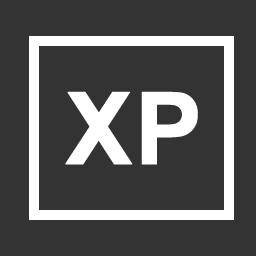
<style>
.page{position:relative;width:256px;height:256px;background:#333333}
.page>*{position:absolute;margin:0}
.t1{font:100px "Arial-BoldMT";color:#ffffff;font-weight:bold}
</style>
<div class="page">
<p class="t1" style="left:65px;top:91px;width:133px;height:74px">XP</p>
</div>
